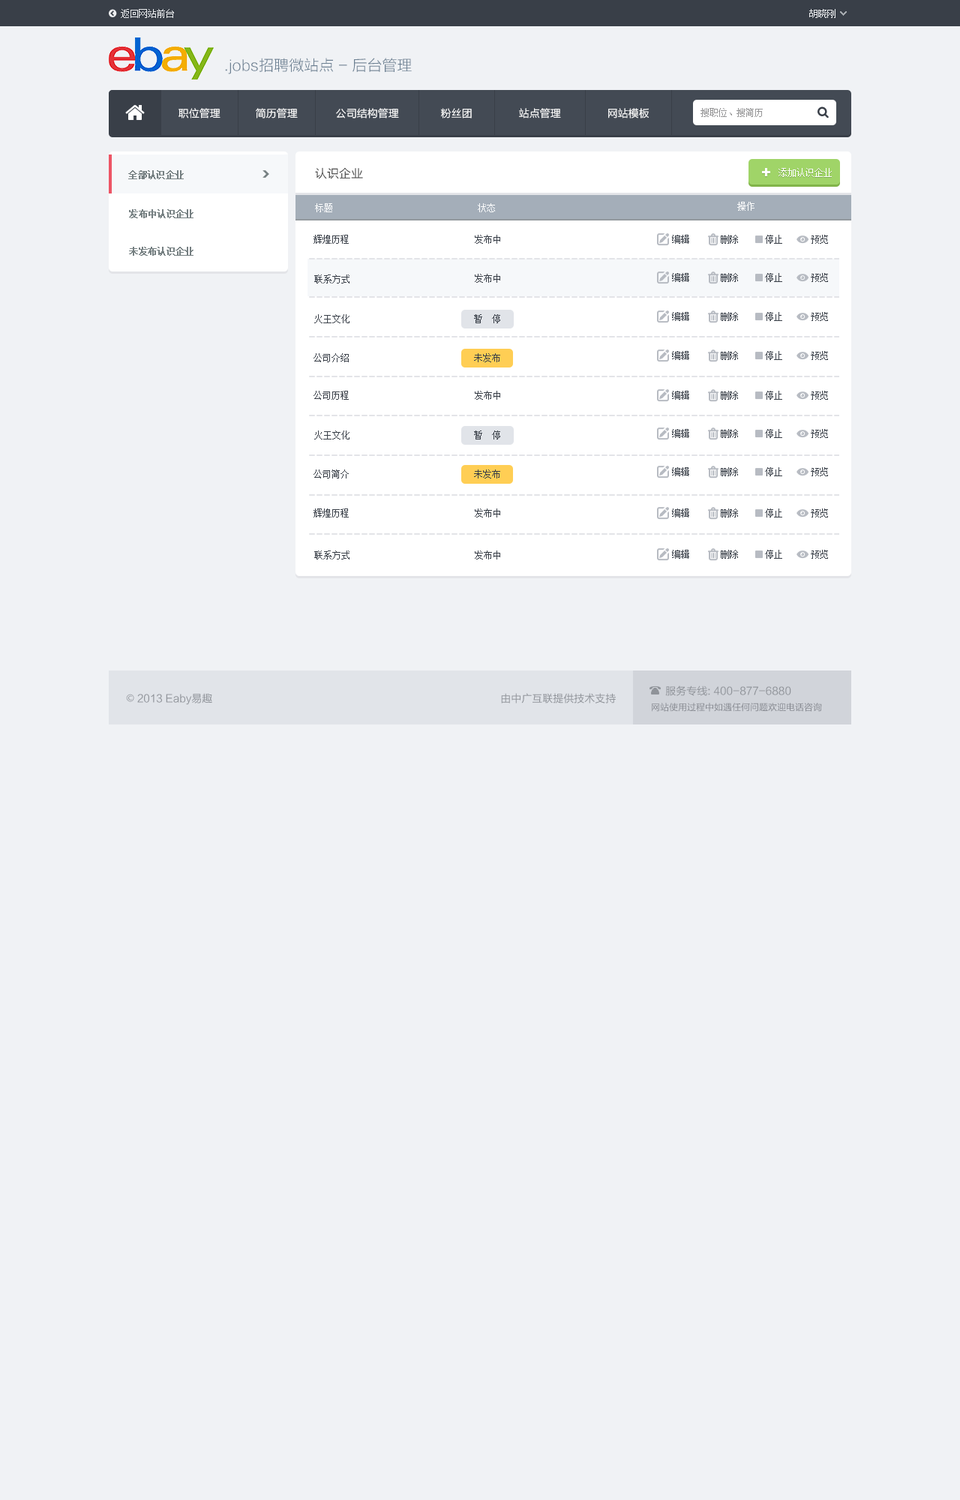
<style>
.page{position:relative;width:960px;height:1500px;background:#f0f2f5}
.page>*{position:absolute;margin:0}
.t1{font:9px "SimSun";color:#eceef0}
.t2{font:15px "FZLTXHK";color:#6c8092}
.t3{font:10.5px "FZLTXHK";color:#ffffff}
.t4{font:9px "SimSun";color:#959596}
.t5{font:9px "SimSun";color:#768082;font-weight:bold}
.t6{font:12px "FZLTXHK";color:#333333}
.t7{font:9px "SimSun";color:#ffffff}
.t8{font:9px "SimSun";color:#393f48}
.t9{font:10.5px "FZLTHK--GBK1-0";color:#8f9399}
.t10{font:10.5px "AdobeHeitiStd-Regular";color:#8f9399}
.t11{font:9px "FZLTHJW--GB1-0";color:#868990}
</style>
<div class="page">
<p class="t1" style="left:121px;top:9px;width:53px;height:9px">返回网站前台</p>
<p class="t1" style="left:809px;top:9px;width:27px;height:9px">胡晓刚</p>
<p class="t2" style="left:225px;top:58px;width:187px;height:16px">.jobs招聘微站点 - 后台管理</p>
<p class="t3" style="left:178px;top:108px;width:42px;height:10px">职位管理</p>
<p class="t3" style="left:256px;top:108px;width:42px;height:10px">简历管理</p>
<p class="t3" style="left:336px;top:108px;width:63px;height:10px">公司结构管理</p>
<p class="t3" style="left:441px;top:108px;width:31px;height:10px">粉丝团</p>
<p class="t3" style="left:519px;top:108px;width:42px;height:10px">站点管理</p>
<p class="t3" style="left:608px;top:108px;width:41px;height:10px">网站模板</p>
<p class="t4" style="left:700px;top:108px;width:63px;height:9px">搜职位、搜简历</p>
<p class="t5" style="left:128px;top:170px;width:56px;height:9px">全部认识企业</p>
<p class="t6" style="left:315px;top:167px;width:48px;height:12px">认识企业</p>
<p class="t7" style="left:778px;top:168px;width:54px;height:9px">添加认识企业</p>
<p class="t5" style="left:129px;top:209px;width:65px;height:9px">发布中认识企业</p>
<p class="t7" style="left:315px;top:203px;width:17px;height:9px">标题</p>
<p class="t7" style="left:478px;top:203px;width:17px;height:9px">状态</p>
<p class="t7" style="left:737px;top:202px;width:17px;height:9px">操作</p>
<p class="t8" style="left:314px;top:235px;width:35px;height:9px">辉煌历程</p>
<p class="t8" style="left:475px;top:235px;width:25px;height:9px">发布中</p>
<p class="t8" style="left:672px;top:235px;width:17px;height:9px">编辑</p>
<p class="t8" style="left:721px;top:235px;width:17px;height:9px">删除</p>
<p class="t8" style="left:765px;top:235px;width:17px;height:9px">停止</p>
<p class="t8" style="left:811px;top:235px;width:17px;height:9px">预览</p>
<p class="t5" style="left:129px;top:247px;width:65px;height:9px">未发布认识企业</p>
<p class="t8" style="left:314px;top:274px;width:36px;height:10px">联系方式</p>
<p class="t8" style="left:475px;top:274px;width:25px;height:9px">发布中</p>
<p class="t8" style="left:672px;top:273px;width:17px;height:9px">编辑</p>
<p class="t8" style="left:721px;top:273px;width:17px;height:9px">删除</p>
<p class="t8" style="left:765px;top:273px;width:17px;height:9px">停止</p>
<p class="t8" style="left:811px;top:273px;width:17px;height:9px">预览</p>
<p class="t8" style="left:314px;top:314px;width:36px;height:9px">火王文化</p>
<p class="t8" style="left:474px;top:314px;width:26px;height:9px">暂  停</p>
<p class="t8" style="left:672px;top:312px;width:17px;height:9px">编辑</p>
<p class="t8" style="left:721px;top:312px;width:17px;height:9px">删除</p>
<p class="t8" style="left:765px;top:312px;width:17px;height:9px">停止</p>
<p class="t8" style="left:811px;top:312px;width:17px;height:9px">预览</p>
<p class="t8" style="left:314px;top:353px;width:35px;height:9px">公司介绍</p>
<p class="t8" style="left:474px;top:353px;width:26px;height:9px">未发布</p>
<p class="t8" style="left:672px;top:351px;width:17px;height:9px">编辑</p>
<p class="t8" style="left:721px;top:351px;width:17px;height:9px">删除</p>
<p class="t8" style="left:765px;top:351px;width:17px;height:9px">停止</p>
<p class="t8" style="left:811px;top:351px;width:17px;height:9px">预览</p>
<p class="t8" style="left:314px;top:391px;width:35px;height:9px">公司历程</p>
<p class="t8" style="left:475px;top:391px;width:25px;height:9px">发布中</p>
<p class="t8" style="left:672px;top:391px;width:17px;height:9px">编辑</p>
<p class="t8" style="left:721px;top:391px;width:17px;height:9px">删除</p>
<p class="t8" style="left:765px;top:391px;width:17px;height:9px">停止</p>
<p class="t8" style="left:811px;top:391px;width:17px;height:9px">预览</p>
<p class="t8" style="left:314px;top:430px;width:36px;height:10px">火王文化</p>
<p class="t8" style="left:474px;top:430px;width:26px;height:10px">暂  停</p>
<p class="t8" style="left:672px;top:429px;width:17px;height:9px">编辑</p>
<p class="t8" style="left:721px;top:429px;width:17px;height:9px">删除</p>
<p class="t8" style="left:765px;top:429px;width:17px;height:9px">停止</p>
<p class="t8" style="left:811px;top:429px;width:17px;height:9px">预览</p>
<p class="t8" style="left:314px;top:470px;width:35px;height:8px">公司简介</p>
<p class="t8" style="left:474px;top:470px;width:26px;height:8px">未发布</p>
<p class="t8" style="left:672px;top:467px;width:17px;height:9px">编辑</p>
<p class="t8" style="left:721px;top:467px;width:17px;height:9px">删除</p>
<p class="t8" style="left:765px;top:467px;width:17px;height:9px">停止</p>
<p class="t8" style="left:811px;top:467px;width:17px;height:9px">预览</p>
<p class="t8" style="left:314px;top:508px;width:35px;height:10px">辉煌历程</p>
<p class="t8" style="left:475px;top:508px;width:25px;height:10px">发布中</p>
<p class="t8" style="left:672px;top:508px;width:17px;height:10px">编辑</p>
<p class="t8" style="left:721px;top:508px;width:17px;height:10px">删除</p>
<p class="t8" style="left:765px;top:508px;width:17px;height:10px">停止</p>
<p class="t8" style="left:811px;top:508px;width:17px;height:10px">预览</p>
<p class="t8" style="left:314px;top:550px;width:36px;height:10px">联系方式</p>
<p class="t8" style="left:475px;top:550px;width:25px;height:10px">发布中</p>
<p class="t8" style="left:672px;top:550px;width:17px;height:9px">编辑</p>
<p class="t8" style="left:721px;top:550px;width:17px;height:9px">删除</p>
<p class="t8" style="left:765px;top:550px;width:17px;height:9px">停止</p>
<p class="t8" style="left:811px;top:550px;width:17px;height:9px">预览</p>
<p class="t9" style="left:665px;top:686px;width:126px;height:10px">服务专线: 400-877-6880</p>
<p class="t9" style="left:126px;top:693px;width:86px;height:12px"><span class="t10">©</span> 2013 Eaby易趣</p>
<p class="t9" style="left:501px;top:693px;width:115px;height:11px">由中广互联提供技术支持</p>
<p class="t11" style="left:652px;top:703px;width:170px;height:9px">网站使用过程中如遇任何问题欢迎电话咨询</p>
</div>
